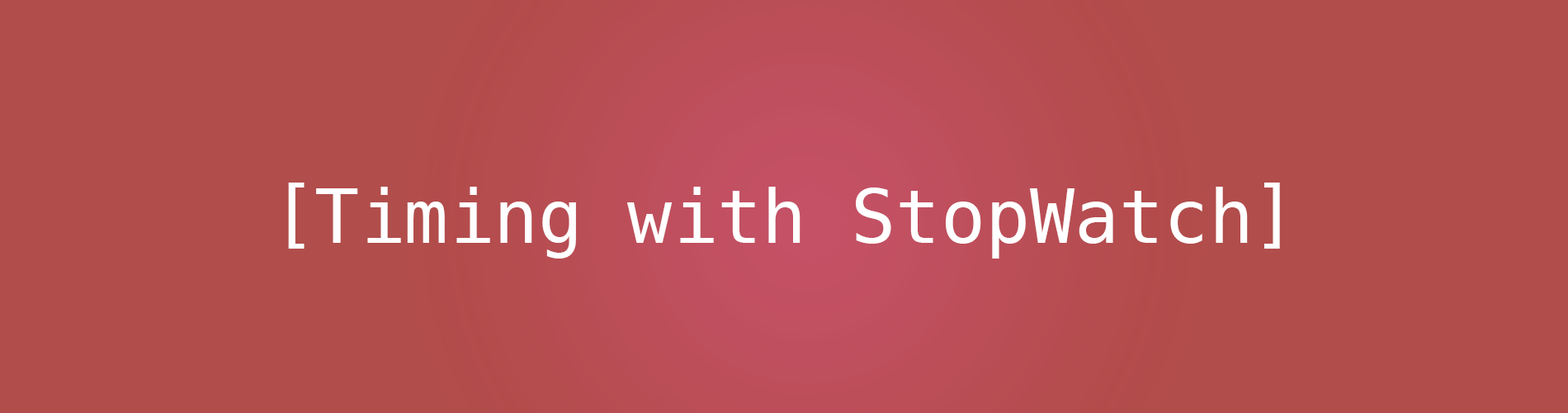
<style>
.page{position:relative;width:1568px;height:413px;background:#b14d4b}
.page>*{position:absolute;margin:0}
.t1{font:74.3px "Menlo-Regular";color:#ffffff}
</style>
<div class="page">
<p class="t1" style="left:288px;top:182px;width:992px;height:76px">[Timing with StopWatch]</p>
</div>
